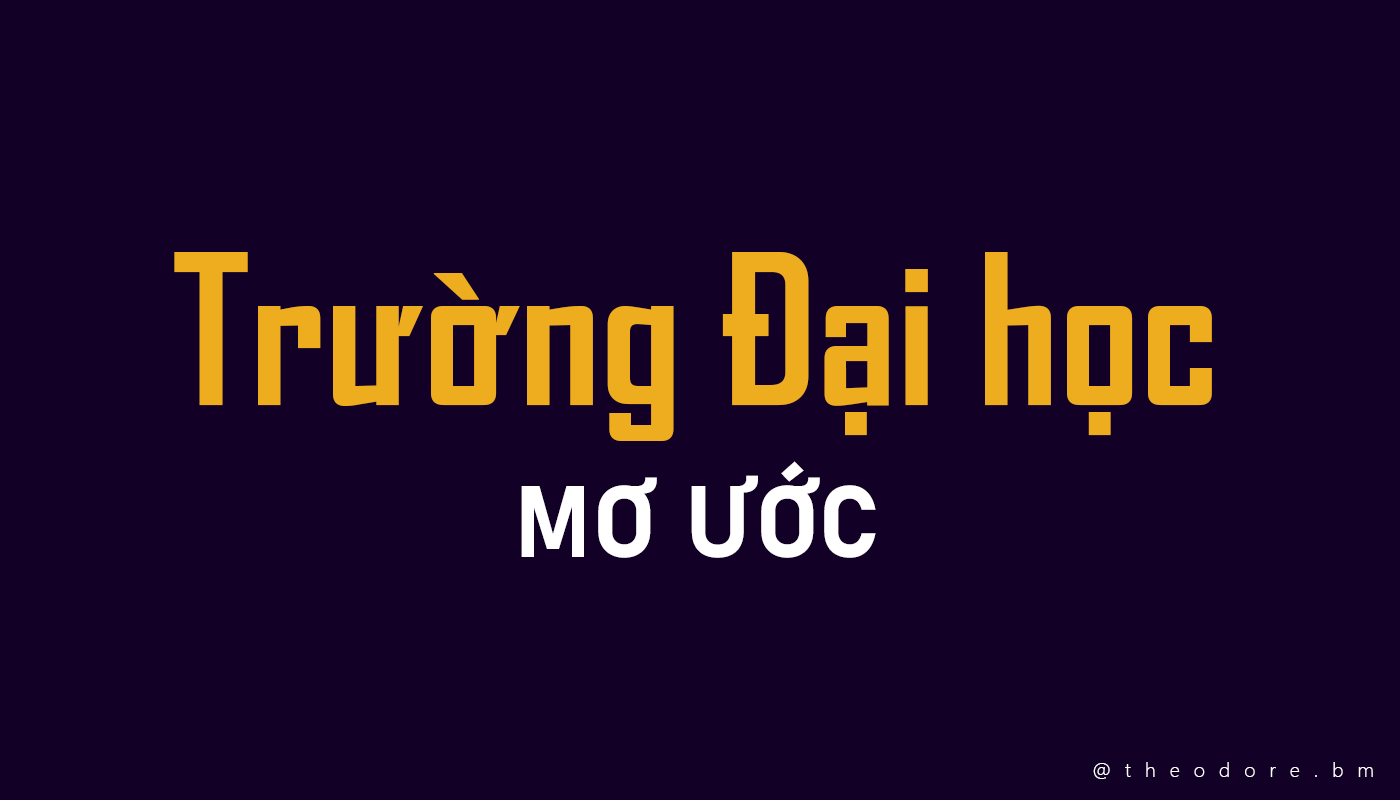
<style>
.page{position:relative;width:1400px;height:800px;background:#120026}
.page>*{position:absolute;margin:0}
.t1{font:200px "SVN-AgencyFBbold";color:#eead1f}
.t2{font:100px "Bahnschrift-Bold";color:#ffffff}
.t3{font:20px "SegoeUI-Light";letter-spacing:0.7em;color:#ffffff}
</style>
<div class="page">
<p class="t1" style="left:174px;top:252px;width:1038px;height:189px">Trường Đại học</p>
<p class="t2" style="left:521px;top:461px;width:355px;height:97px">MƠ ƯỚC</p>
<p class="t3" style="left:1093px;top:762px;width:280px;height:17px">@theodore.bm</p>
</div>
